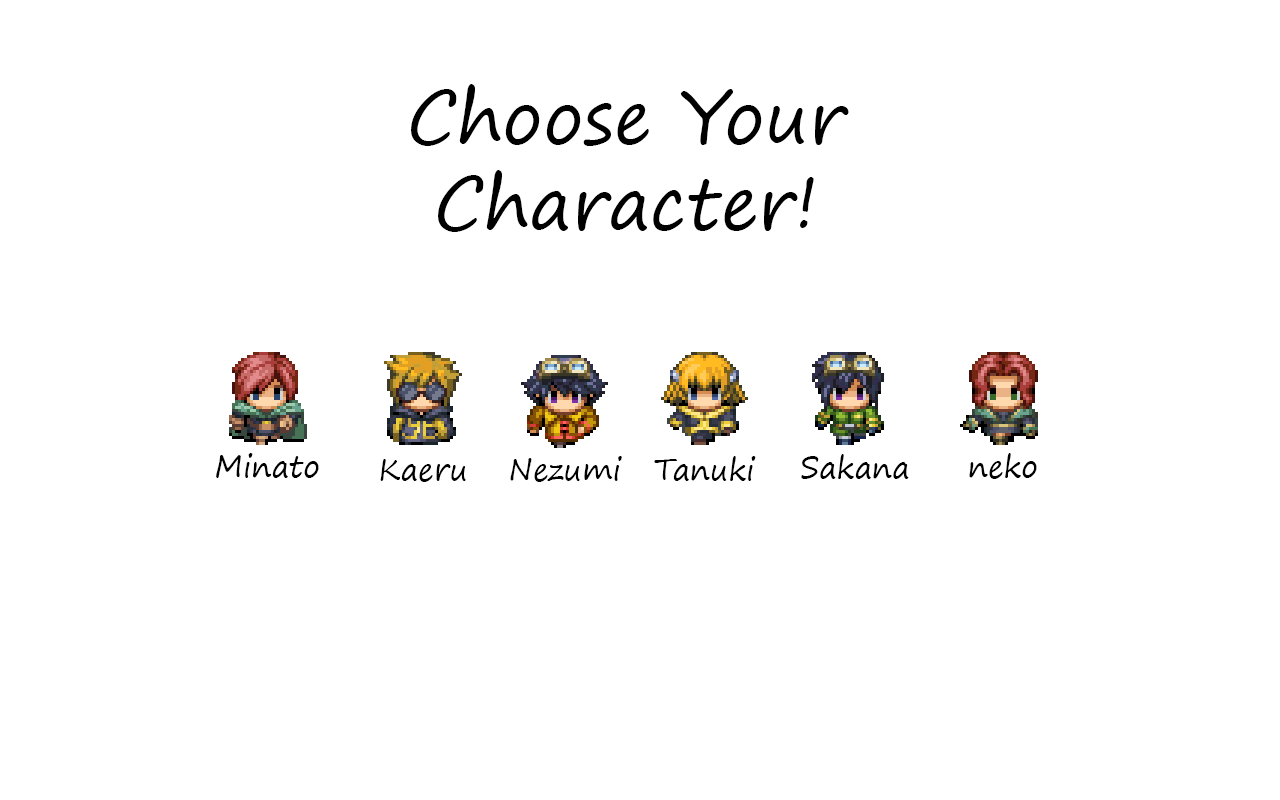
<style>
.page{position:relative;width:1280px;height:800px;background:#ffffff}
.page>*{position:absolute;margin:0}
.t1{font:72px "SegoePrint";color:#000000}
.t2{font:30px "SegoePrint";color:#000000}
</style>
<div class="page">
<p class="t1" style="left:411px;top:84px;width:438px;height:148px;text-align:center">Choose Your Character!</p>
<p class="t2" style="left:216px;top:453px;width:103px;height:25px">Minato</p>
<p class="t2" style="left:380px;top:459px;width:86px;height:23px">Kaeru</p>
<p class="t2" style="left:510px;top:456px;width:112px;height:26px">Nezumi</p>
<p class="t2" style="left:654px;top:456px;width:102px;height:25px">Tanuki</p>
<p class="t2" style="left:801px;top:454px;width:108px;height:25px">Sakana</p>
<p class="t2" style="left:969px;top:453px;width:68px;height:26px">neko</p>
</div>
